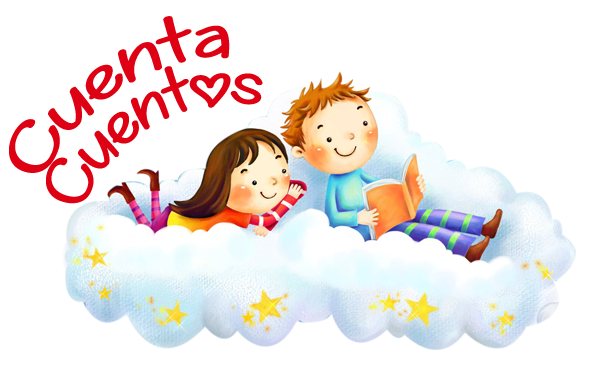
<style>
.page{position:relative;width:600px;height:373px;background:#ffffff}
.page>*{position:absolute;margin:0}
.t1{font:58px/48px "IFoundMyValentine";color:#de0113}
</style>
<div class="page">
<p class="t1" style="left:9px;top:16px;width:254px;height:188px;text-align:center;rotate:-30deg">Cuenta <br>Cuentos</p>
</div>
